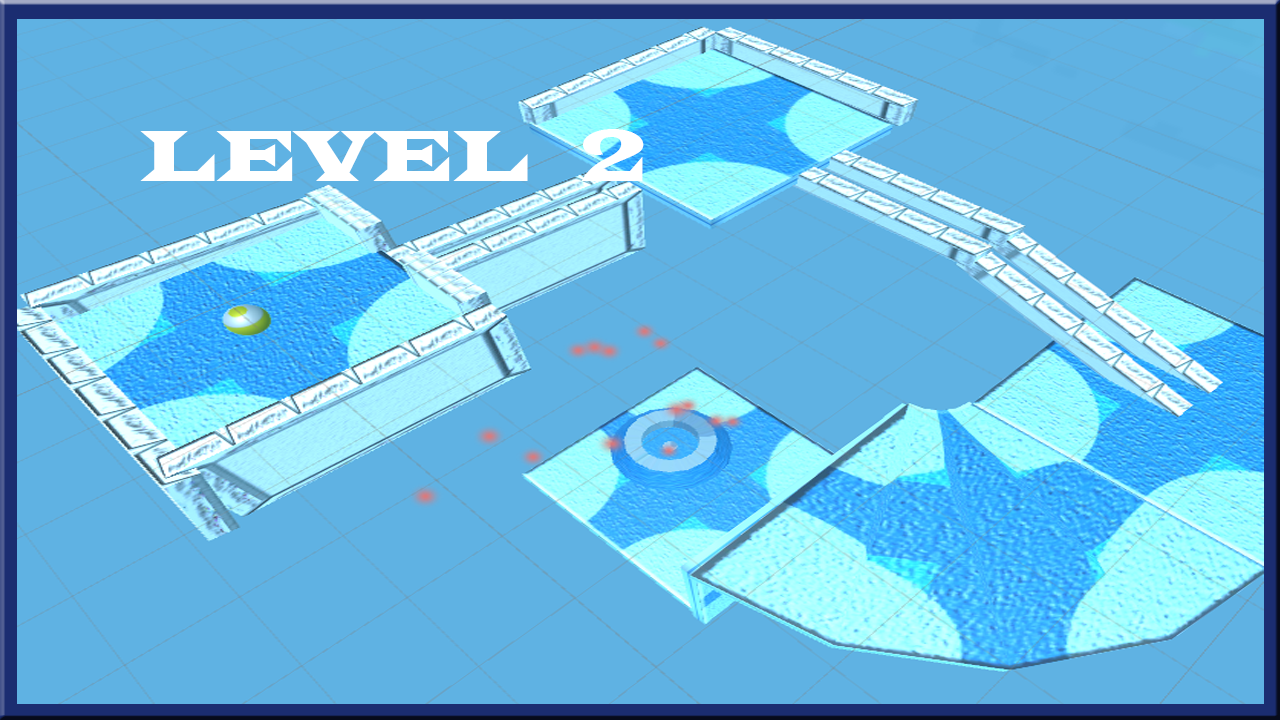
<style>
.page{position:relative;width:1280px;height:720px;background:#5fb2e3}
.page>*{position:absolute;margin:0}
.t1{font:75.4px "LatinWide";color:#ffffff;scale:0.76 1}
</style>
<div class="page">
<p class="t1" style="left:140px;top:129px;width:504px;height:52px">LEVEL   2</p>
</div>
